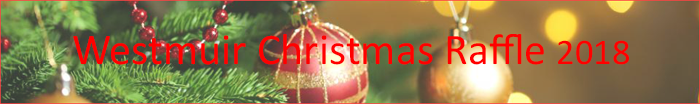
<style>
.page{position:relative;width:700px;height:104px}
.page>*{position:absolute;margin:0}
.t1{font:44px "Calibri";color:#ff0000}
.t2{font:36.3px "Calibri";color:#ff0000}
</style>
<div class="page">
<p class="t1" style="left:73px;top:34px;width:556px;height:31px">Westmuir Christmas Raffle <span class="t2">2018</span></p>
</div>
